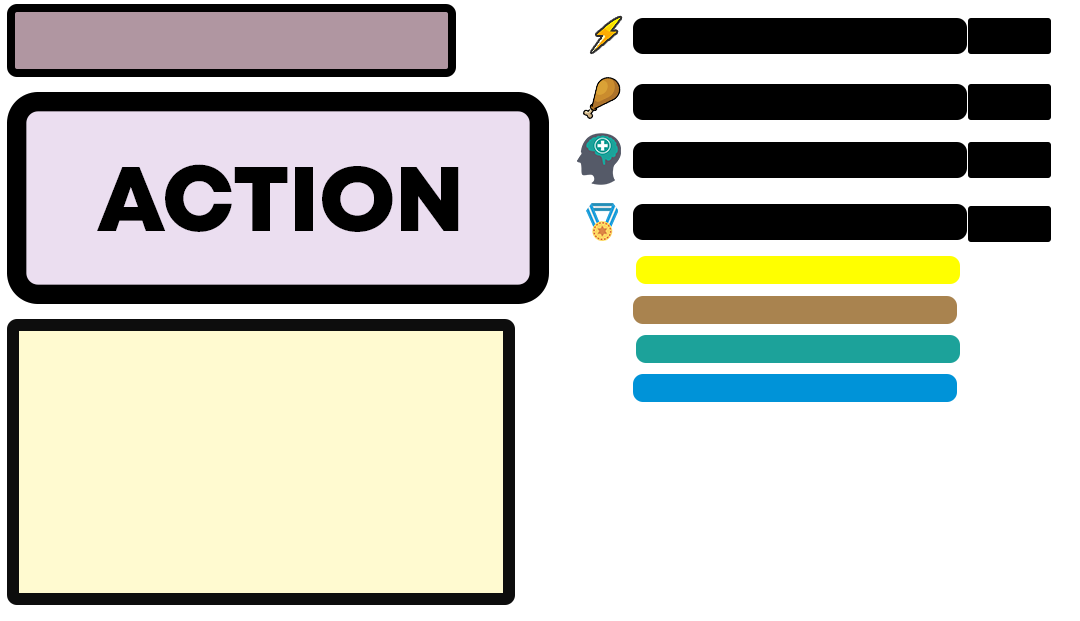
<style>
.page{position:relative;width:1080px;height:621px;background:#ffffff}
.page>*{position:absolute;margin:0}
.t1{font:91.7px "Mont-HeavyDEMO";color:#000000}
</style>
<div class="page">
<p class="t1" style="left:97px;top:164px;width:362px;height:68px">ACTION</p>
</div>
